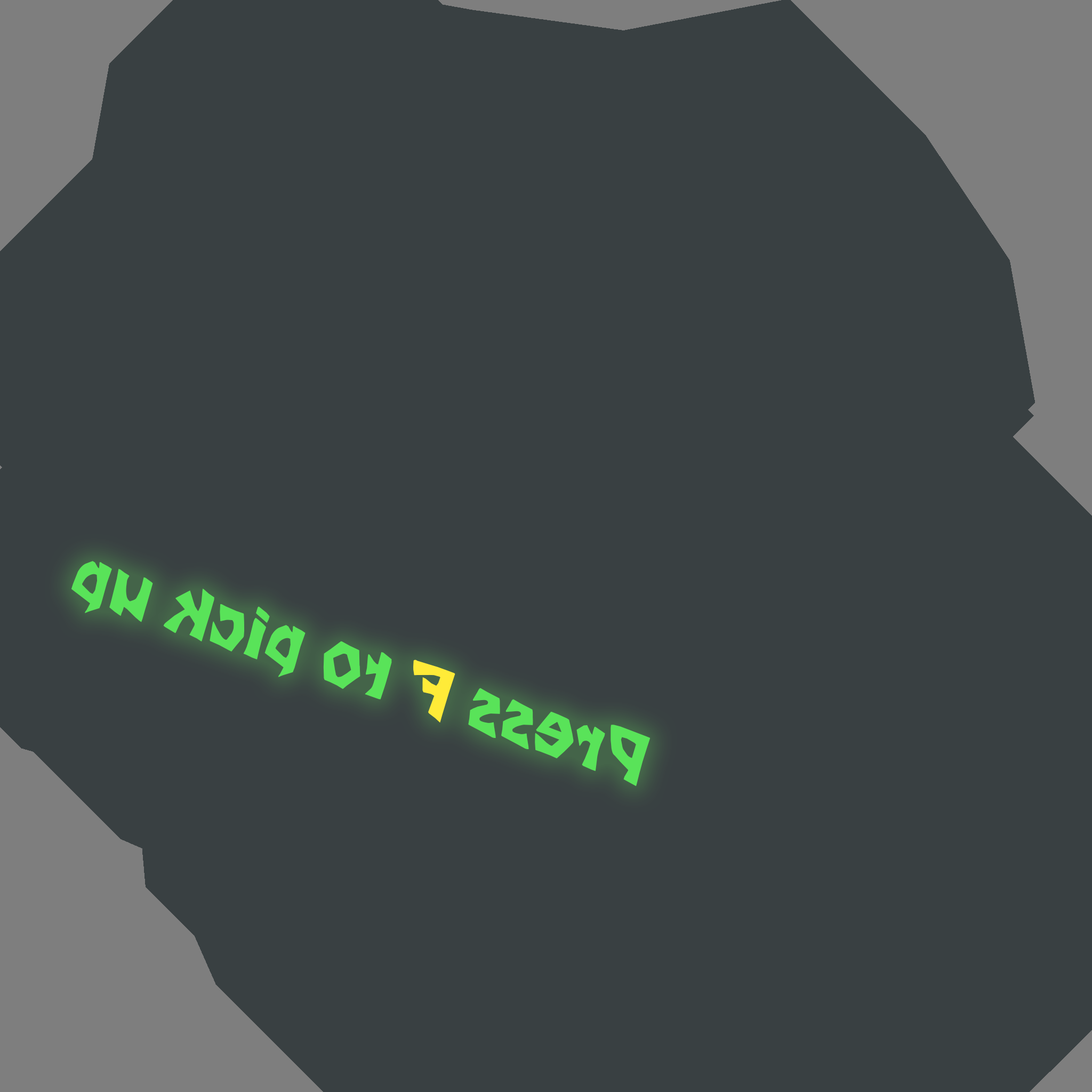
<style>
.page{position:relative;width:1092px;height:1092px;background:#394042}
.page>*{position:absolute;margin:0}
.t1{font:66.6px "Tarzan";color:#59e359}
.t2{font:66.6px "Tarzan";color:#ffeb38}
</style>
<div class="page">
<p class="t1" style="left:71px;top:561px;width:579px;height:225px;rotate:-162deg">Press <span class="t2">F</span> to pick up</p>
</div>
